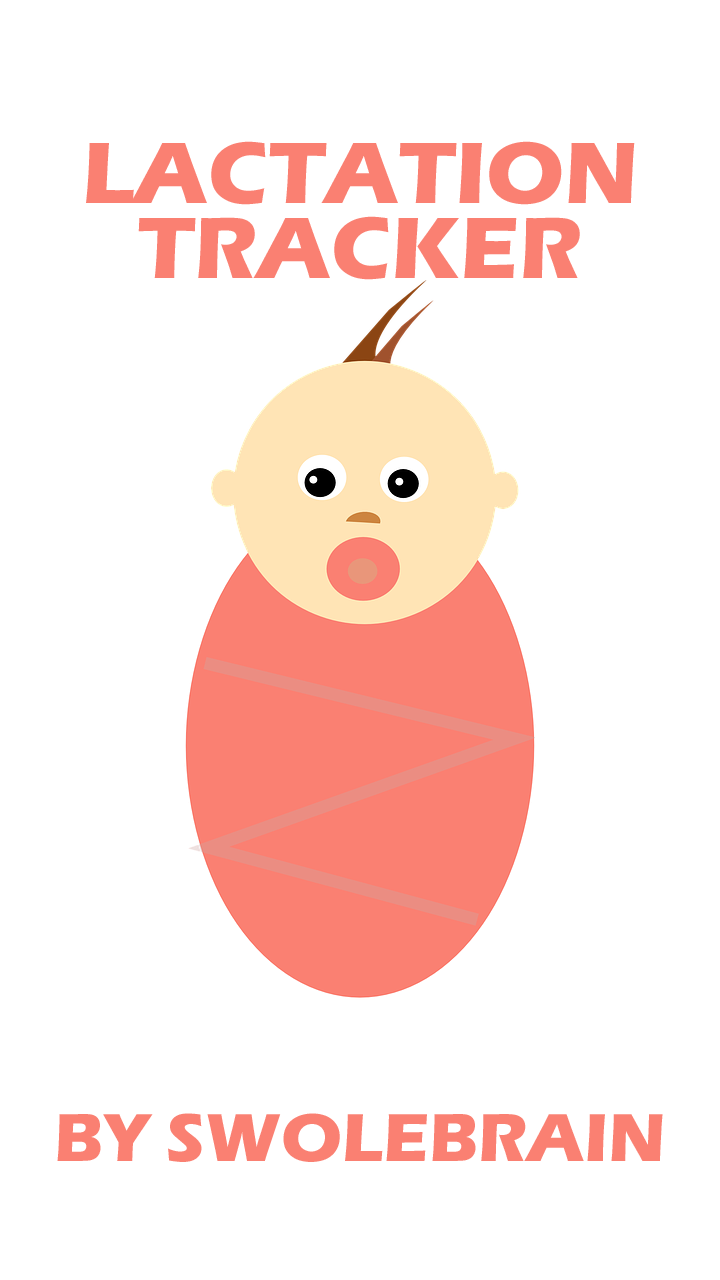
<style>
.page{position:relative;width:720px;height:1280px;background:#ffffff}
.page>*{position:absolute;margin:0}
.t1{font:90px/4.2px "ErasITC-Bold";color:#fa8072;text-transform:uppercase}
.t2{font:70px "ErasITC-Bold";color:#fa8072;text-transform:uppercase}
</style>
<div class="page">
<p class="t1" style="left:86px;top:141px;width:549px;height:139px;text-align:center">Lactation<br><br><br><br><br><br><br><br><br><br><br><br><br><br><br><br><br><br>Tracker</p>
<p class="t2" style="left:57px;top:1113px;width:606px;height:49px">By Swolebrain</p>
</div>
